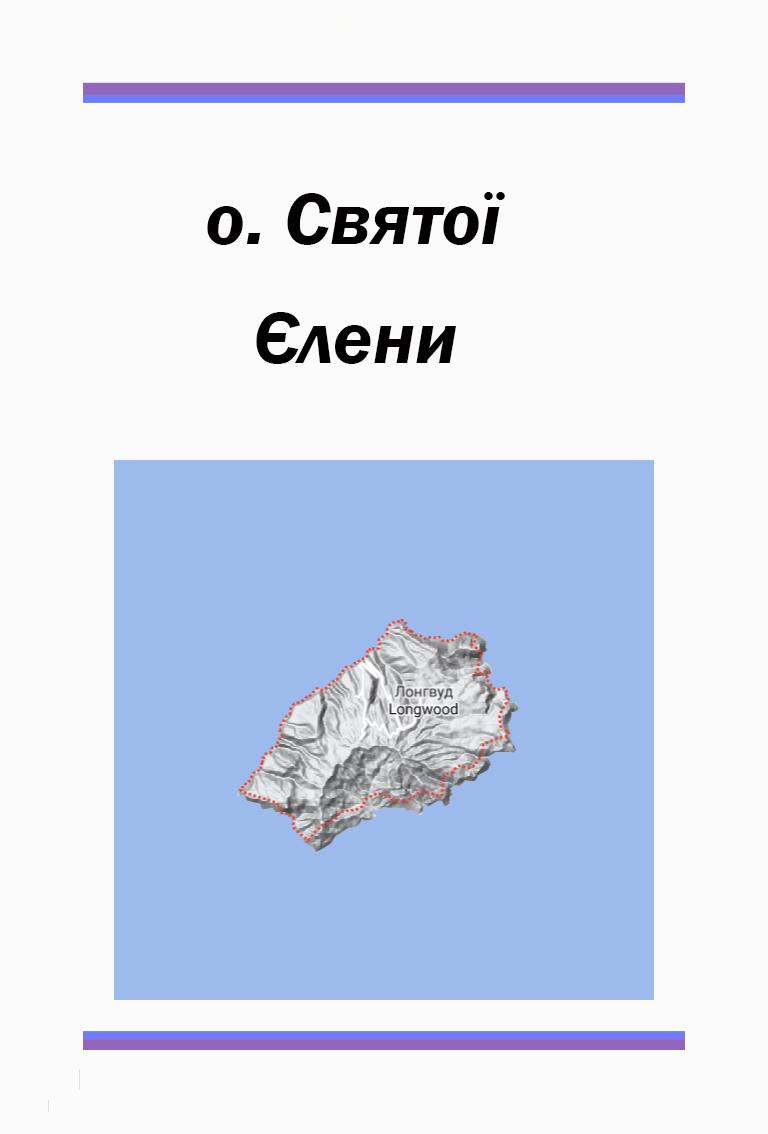
<style>
.page{position:relative;width:768px;height:1134px;background:#fbfbfb}
.page>*{position:absolute;margin:0}
.t1{font:75px "FranklinGothic-DemiItalic";color:#020000}
</style>
<div class="page">
<p class="t1" style="left:207px;top:192px;width:298px;height:53px">о. Святої</p>
<p class="t1" style="left:256px;top:312px;width:201px;height:52px">Єлени</p>
</div>
